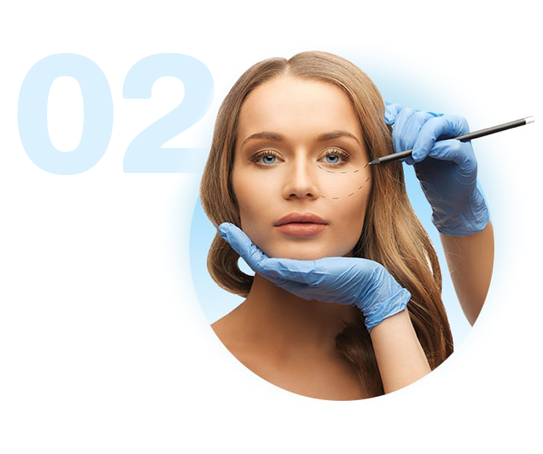
<style>
.page{position:relative;width:543px;height:454px;background:#ffffff}
.page>*{position:absolute;margin:0}
.t1{font:153.2px "HelvKazBold";letter-spacing:-0.04em;color:#dbf2fe;text-transform:uppercase;font-weight:bold}
</style>
<div class="page">
<p class="t1" style="left:17px;top:52px;width:198px;height:124px">02</p>
</div>
